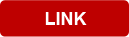
<style>
.page{position:relative;width:129px;height:37px;background:#be0000}
.page>*{position:absolute;margin:0}
.t1{font:18px "Arial-BoldMT";color:#ffffff}
</style>
<div class="page">
<p class="t1" style="left:45px;top:12px;width:42px;height:13px">LINK</p>
</div>
